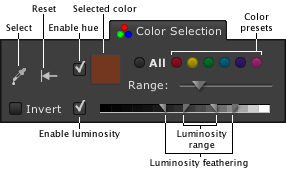
<style>
.page{position:relative;width:286px;height:171px;background:#ffffff}
.page>*{position:absolute;margin:0}
.t1{font:9px "LucidaGrande"}
.t2{font:9px "LucidaGrande";color:#000000}
</style>
<div class="page">
<p class="t1" style="left:32px;top:5px;width:24px;height:7px">Reset</p>
<p class="t2" style="left:73px;top:5px;width:64px;height:7px">Selected color</p>
<p class="t2" style="left:241px;top:13px;width:31px;height:20px;text-align:center">Color<br>presets</p>
<p class="t1" style="left:6px;top:24px;width:26px;height:7px">Select</p>
<p class="t2" style="left:49px;top:24px;width:49px;height:7px">Enable hue</p>
<p class="t2" style="left:39px;top:130px;width:81px;height:9px">Enable luminosity</p>
<p class="t2" style="left:177px;top:130px;width:50px;height:20px;text-align:center">Luminosity<br>range</p>
<p class="t2" style="left:150px;top:159px;width:98px;height:9px">Luminosity feathering</p>
</div>
